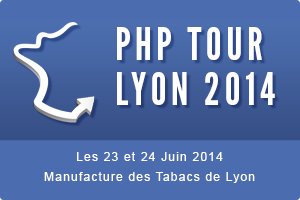
<style>
.page{position:relative;width:300px;height:200px;background:#4b6daf}
.page>*{position:absolute;margin:0}
.t1{font:44.4px/45px "LeagueGothic";letter-spacing:0.1em;color:#ffffff}
.t2{font:12px/20px "ArialMT";letter-spacing:0.1em;color:#ffffff}
</style>
<div class="page">
<p class="t1" style="left:117px;top:27px;width:158px;height:78px">PHP TOUR<br>LYON 2014</p>
<p class="t2" style="left:44px;top:152px;width:211px;height:31px;text-align:center">Les 23 et 24 Juin 2014<br>Manufacture des Tabacs de Lyon</p>
</div>
